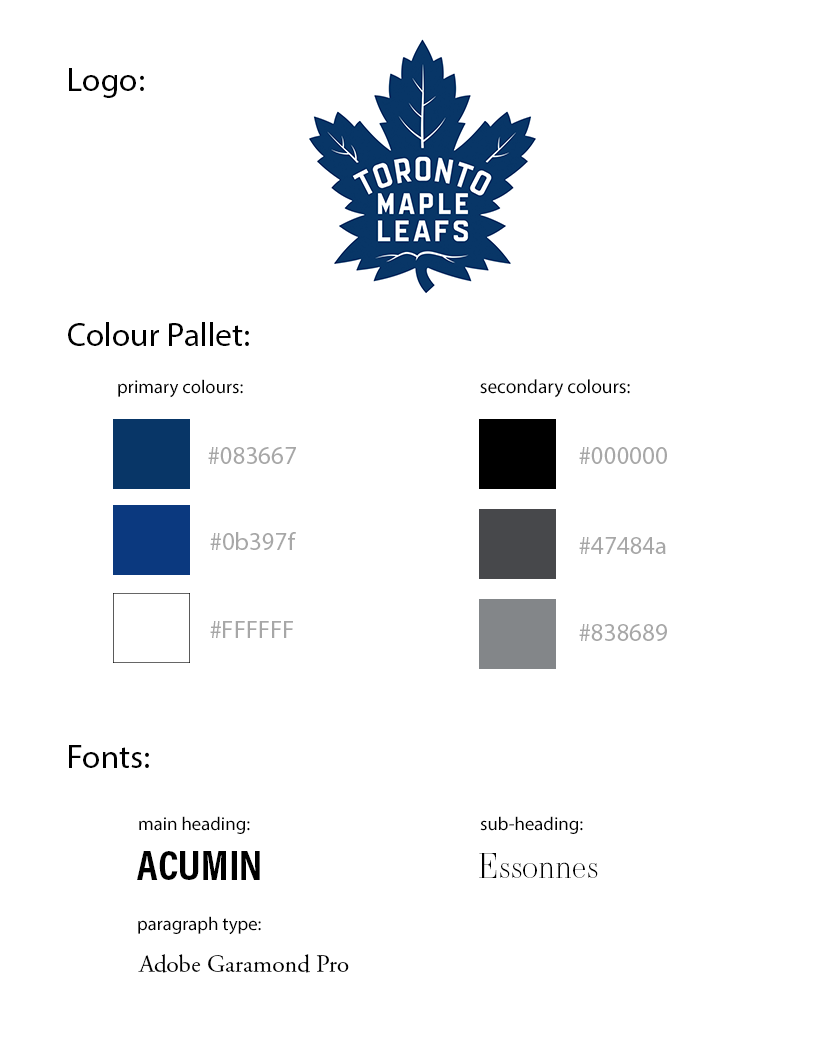
<style>
.page{position:relative;width:818px;height:1039px;background:#ffffff}
.page>*{position:absolute;margin:0}
.t1{font:33.3px "MyriadPro-Regular";color:#000000}
.t2{font:18.7px "MyriadPro-Regular";color:#000000}
.t3{font:19.4px "MyriadPro-Regular";color:#000000}
.t4{font:25px "MyriadPro-Regular";color:#a7a7a7}
.t5{font:42.9px "AcuminProCond-Bold";color:#000000}
.t6{font:33.3px "EssonnesDisplay-Light";color:#000000}
.t7{font:25px "AGaramondPro-Regular";color:#000000}
</style>
<div class="page">
<p class="t1" style="left:69px;top:68px;width:75px;height:30px">Logo:</p>
<p class="t1" style="left:68px;top:322px;width:181px;height:24px">Colour Pallet:</p>
<p class="t2" style="left:118px;top:379px;width:125px;height:19px">primary colours:</p>
<p class="t3" style="left:480px;top:379px;width:150px;height:19px">secondary colours:</p>
<p class="t4" style="left:210px;top:532px;width:86px;height:18px">#0b397f</p>
<p class="t4" style="left:579px;top:537px;width:87px;height:17px">#47484a</p>
<p class="t4" style="left:210px;top:621px;width:83px;height:17px">#FFFFFF</p>
<p class="t4" style="left:579px;top:624px;width:88px;height:17px">#838689</p>
<p class="t1" style="left:69px;top:745px;width:80px;height:23px">Fonts:</p>
<p class="t2" style="left:139px;top:816px;width:111px;height:18px">main heading:</p>
<p class="t2" style="left:480px;top:816px;width:103px;height:18px">sub-heading:</p>
<p class="t5" style="left:137px;top:851px;width:123px;height:29px">ACUMIN</p>
<p class="t6" style="left:479px;top:853px;width:119px;height:25px">Essonnes</p>
<p class="t2" style="left:138px;top:916px;width:123px;height:19px">paragraph type:</p>
<p class="t7" style="left:138px;top:954px;width:211px;height:19px">Adobe Garamond Pro</p>
</div>
